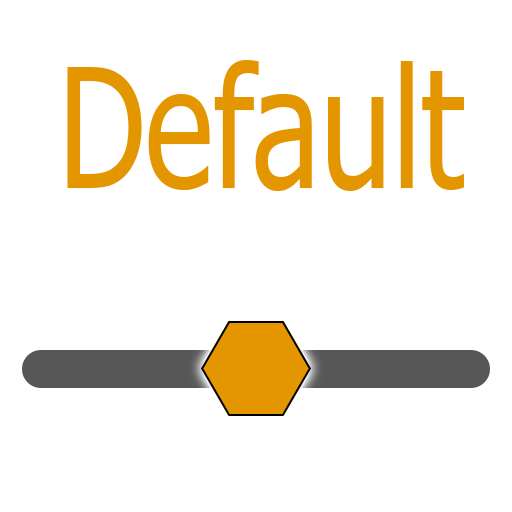
<style>
.page{position:relative;width:512px;height:512px;background:#ffffff}
.page>*{position:absolute;margin:0}
.t1{font:166.7px "Tahoma";color:#e39600;scale:0.77 1}
</style>
<div class="page">
<p class="t1" style="left:67px;top:60px;width:397px;height:131px">Default</p>
</div>
